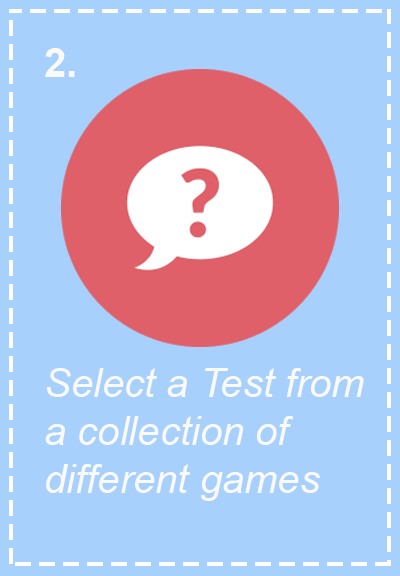
<style>
.page{position:relative;width:400px;height:576px;background:#a7d0fd}
.page>*{position:absolute;margin:0}
.t1{font:40px "Arial-BoldMT";color:#fafafa}
.t2{font:40px "Arial-ItalicMT";color:#fafafa}
</style>
<div class="page">
<p class="t1" style="left:45px;top:48px;width:30px;height:29px">2.</p>
<p class="t2" style="left:45px;top:368px;width:319px;height:133px">Select a Test from a collection of <br>different games</p>
</div>
